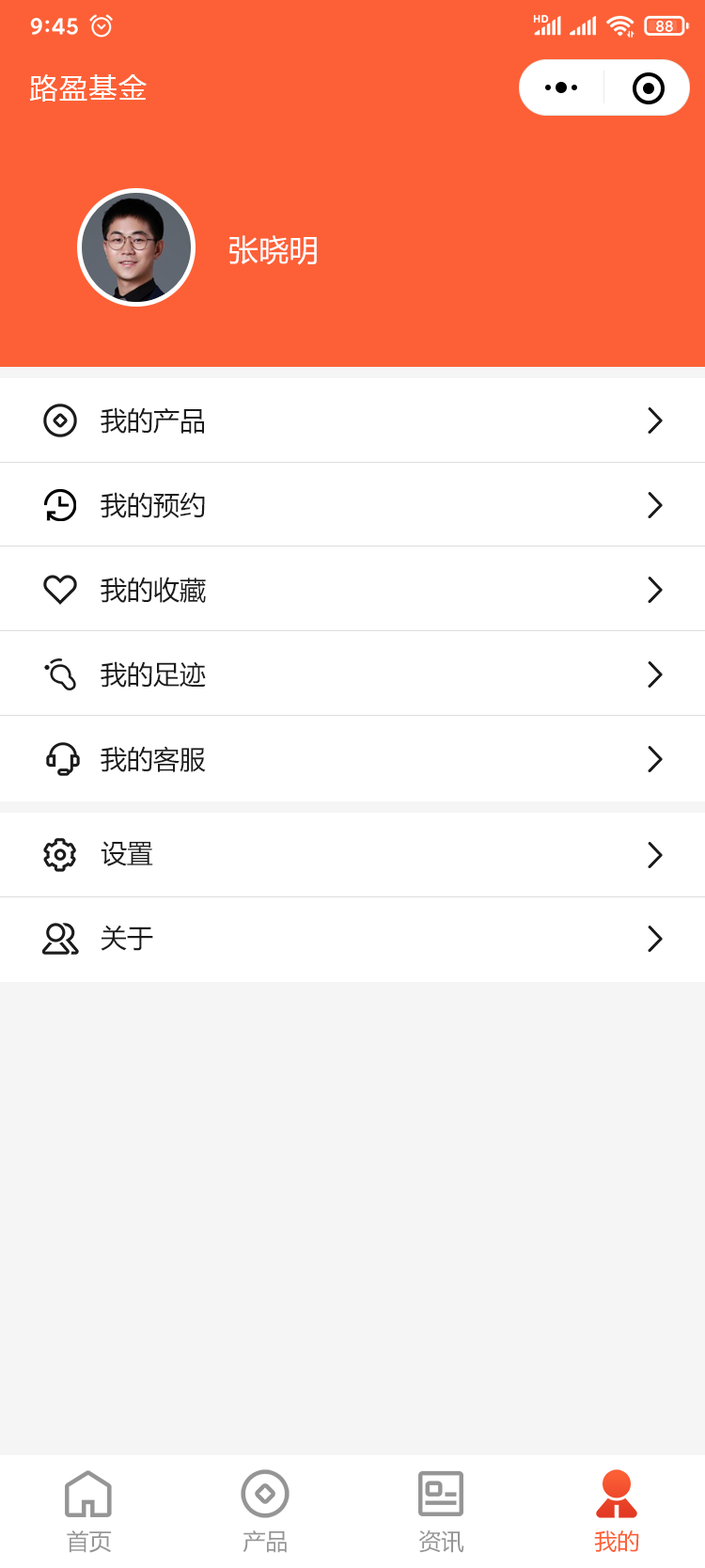
<style>
.page{position:relative;width:705px;height:1568px;background:#ffffff}
.page>*{position:absolute;margin:0}
.t1{font:28.2px "MicrosoftYaHei";letter-spacing:0.05em;color:#ffffff}
.t2{font:30.1px "MicrosoftYaHei";color:#ffffff}
.t3{font:26.3px/84.7px "MicrosoftYaHei";color:#1b1b1b}
.t4{font:22.6px "MicrosoftYaHei";color:#959595}
.t5{font:22.6px "MicrosoftYaHei";color:#fd6036}
</style>
<div class="page">
<p class="t1" style="left:29px;top:74px;width:118px;height:28px">路盈基金</p>
<p class="t2" style="left:230px;top:235px;width:87px;height:30px">张晓明</p>
<p class="t3" style="left:101px;top:407px;width:105px;height:365px">我的产品<br>我的预约<br>我的收藏<br>我的足迹<br>我的客服</p>
<p class="t3" style="left:101px;top:841px;width:52px;height:110px">设置<br>关于</p>
<p class="t4" style="left:419px;top:1529px;width:46px;height:24px">资讯</p>
<p class="t4" style="left:67px;top:1530px;width:44px;height:23px">首页</p>
<p class="t4" style="left:243px;top:1530px;width:44px;height:23px">产品</p>
<p class="t5" style="left:594px;top:1530px;width:46px;height:22px">我的</p>
</div>
